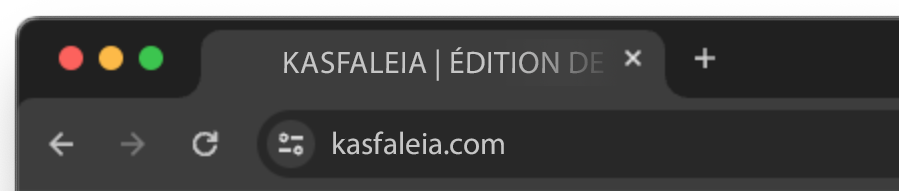
<style>
.page{position:relative;width:899px;height:191px;background:#3d3d3d}
.page>*{position:absolute;margin:0}
.t1{font:31.2px "MyriadPro-Regular";color:#c6c6c6;text-transform:uppercase}
.t2{font:31.2px "MyriadPro-Regular";color:#c6c6c6}
</style>
<div class="page">
<p class="t1" style="left:284px;top:47px;width:320px;height:34px">kasfaleia | Édition de</p>
<p class="t2" style="left:333px;top:131px;width:171px;height:24px">kasfaleia.com</p>
</div>
